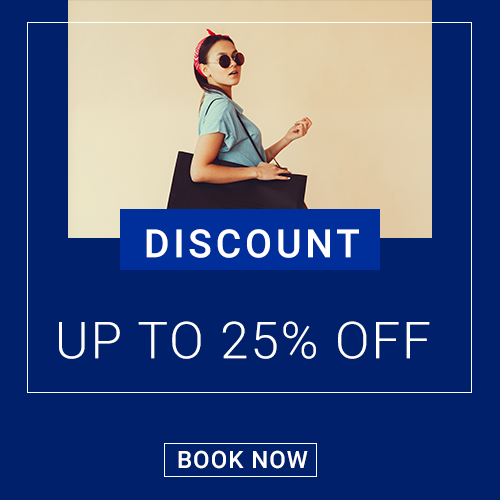
<style>
.page{position:relative;width:500px;height:500px;background:#00206c}
.page>*{position:absolute;margin:0}
.t1{font:39px "Roboto-Medium";letter-spacing:0.1em;color:#ffffff}
.t2{font:51px "Roboto-Light";letter-spacing:0.04em;color:#ffffff}
.t3{font:24px "Roboto-Medium";letter-spacing:0.04em;color:#ffffff}
</style>
<div class="page">
<p class="t1" style="left:146px;top:229px;width:213px;height:29px">DISCOUNT</p>
<p class="t2" style="left:59px;top:321px;width:371px;height:38px">UP TO 25% OFF</p>
<p class="t3" style="left:178px;top:450px;width:130px;height:19px">BOOK NOW</p>
</div>
